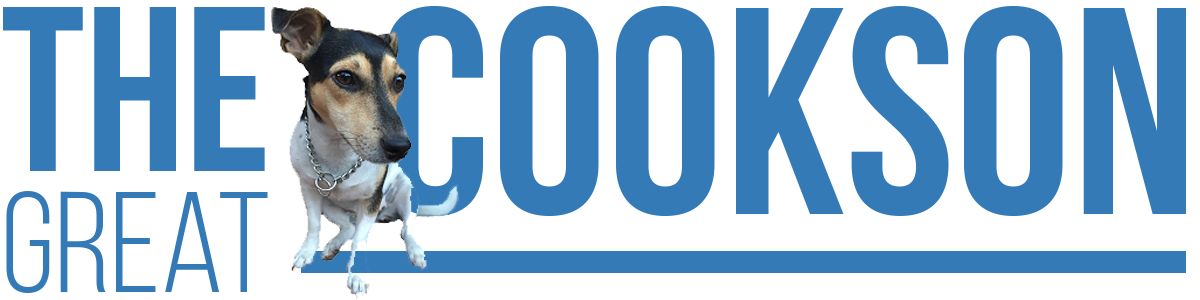
<style>
.page{position:relative;width:1200px;height:300px;background:#ffffff}
.page>*{position:absolute;margin:0}
.t1{font:294.9px "BebasNeueBold";color:#337ab7}
.t2{font:234.8px "BebasNeueBold";color:#337ab7}
.t3{font:143.3px "BebasNeueBook";color:#337ab7}
</style>
<div class="page">
<p class="t1" style="left:386px;top:6px;width:800px;height:210px">Cookson</p>
<p class="t2" style="left:3px;top:7px;width:262px;height:164px">The</p>
<p class="t3" style="left:6px;top:191px;width:262px;height:102px">Great</p>
</div>
